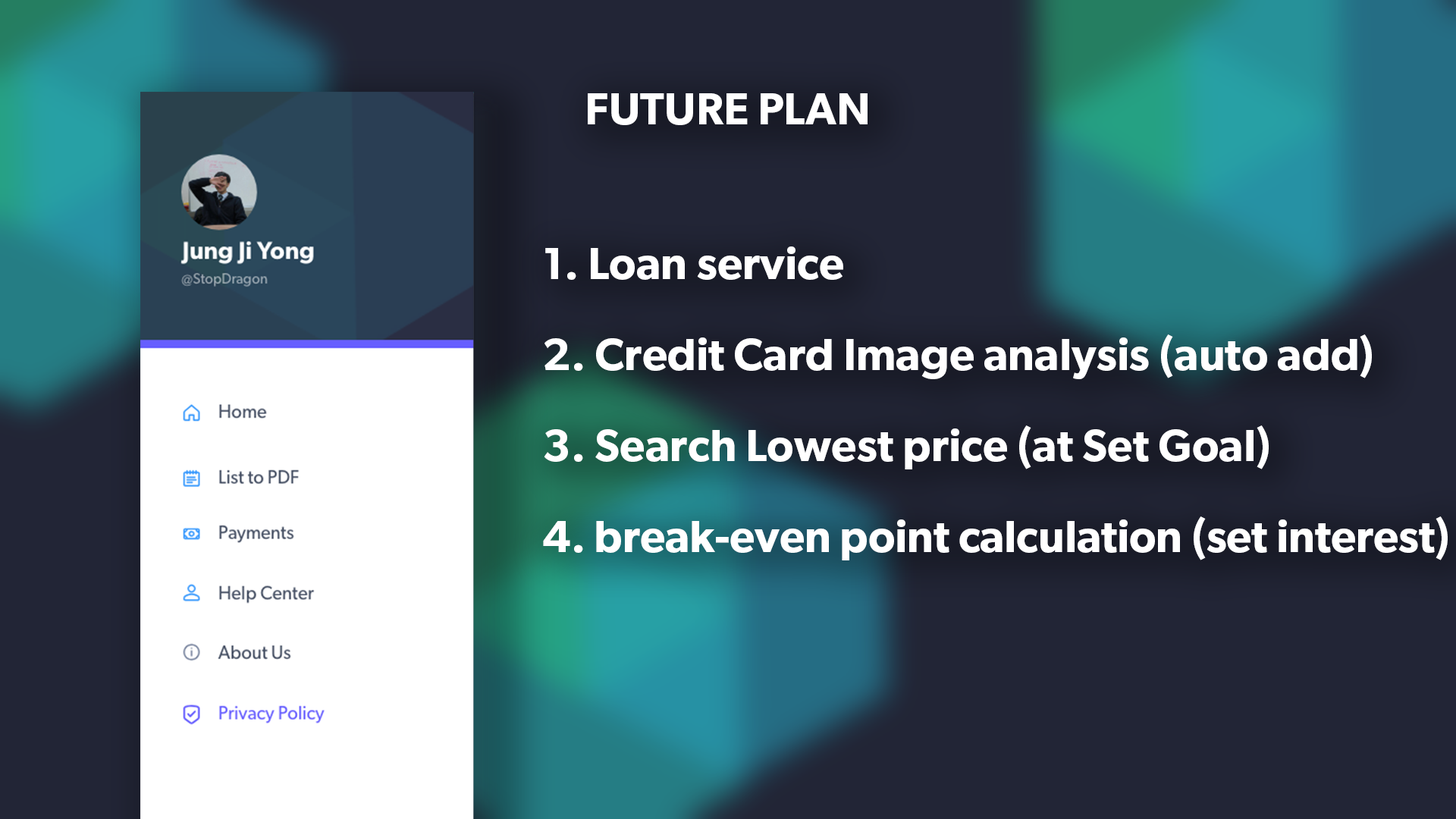
<style>
.page{position:relative;width:1456px;height:819px;background:#222536}
.page>*{position:absolute;margin:0}
.t1{font:45.5px "Gibson-SemiBold";color:#ffffff}
.t2{font:45.5px/45.5px "Gibson-SemiBold";color:#ffffff}
.t3{font:45.5px/45.5px "Gibson-SemiBold";letter-spacing:-0.005em;color:#ffffff}
</style>
<div class="page">
<p class="t1" style="left:588px;top:93px;width:280px;height:32px">FUTURE PLAN</p>
<p class="t2" style="left:543px;top:246px;width:905px;height:314px">1. Loan service<br><br>2. Credit Card Image analysis (auto add)<br><br>3. Search Lowest price (at Set Goal)<br><br><span class="t3">4. break-even point calculation (set interest)</span></p>
</div>
